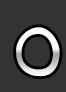
<style>
.page{position:relative;width:66px;height:92px;background:#333333}
.page>*{position:absolute;margin:0}
.t1{font:112px "IndieFlower-Regular";color:#ffffff}
</style>
<div class="page">
<p class="t1" style="left:16px;top:27px;width:44px;height:50px">0</p>
</div>
